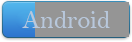
<style>
.page{position:relative;width:132px;height:42px;background:#959595}
.page>*{position:absolute;margin:0}
.t1{font:26px "BellMT";color:#b8c8dc}
</style>
<div class="page">
<p class="t1" style="left:22px;top:11px;width:88px;height:17px">Android</p>
</div>
